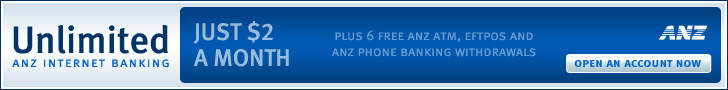
<style>
.page{position:relative;width:728px;height:90px}
.page>*{position:absolute;margin:0}
.t1{font:38px "MetaMediumLF-Roman";color:#003366}
.t2{font:24px/26px "MetaMediumLF-Roman";color:#99bbdc}
.t3{font:14px/16px "MetaNormalLF-Caps";color:#669cd2}
.t4{font:14px "MetaNormalLF-Caps";letter-spacing:0.086em;color:#0066cc}
.t5{font:13px "MetaBold-Caps";letter-spacing:0.01em;color:#0066cc}
</style>
<div class="page">
<p class="t1" style="left:13px;top:25px;width:155px;height:29px">Unlimited</p>
<p class="t2" style="left:193px;top:21px;width:96px;height:46px">JUST $2 <br>A MONTH</p>
<p class="t3" style="left:331px;top:30px;width:205px;height:27px;text-align:center">plus 6 free anz atm, eftpos and <br>anz phone banking withdrawals</p>
<p class="t4" style="left:12px;top:59px;width:157px;height:9px">anz internet banking</p>
<p class="t5" style="left:574px;top:60px;width:127px;height:7px">open an account now</p>
</div>
